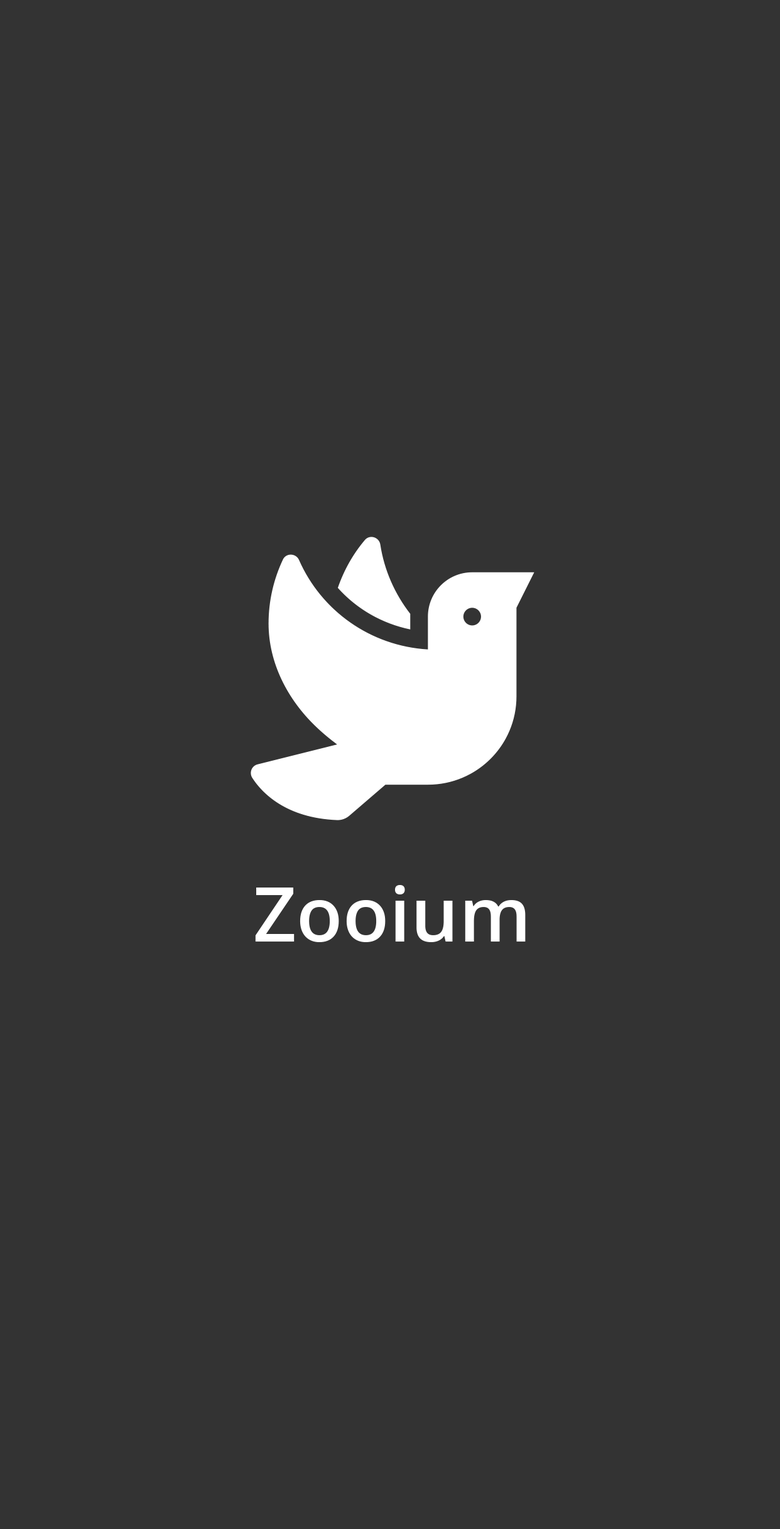
<style>
.page{position:relative;width:780px;height:1529px;background:#333333}
.page>*{position:absolute;margin:0}
.t1{font:75.3px "OpenSans-SemiBold";letter-spacing:0.005em;color:#ffffff}
</style>
<div class="page">
<p class="t1" style="left:255px;top:885px;width:270px;height:57px">Zooium</p>
</div>
